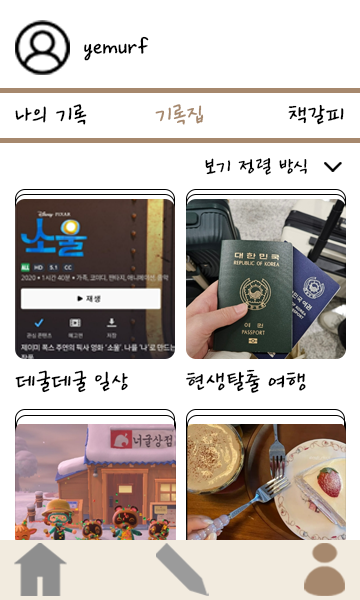
<style>
.page{position:relative;width:360px;height:600px;background:#ffffff}
.page>*{position:absolute;margin:0}
.t1{font:25px "Ownglyph_Dailyokja-Rg";color:#000000}
.t2{font:25px "Ownglyph_Dailyokja-Rg";color:#a6886d}
.t3{font:22px "Ownglyph_Dailyokja-Rg";color:#000000}
.t4{font:24.9px "Ownglyph_Dailyokja-Rg";color:#000000}
</style>
<div class="page">
<p class="t1" style="left:84px;top:36px;width:65px;height:25px">yemurf</p>
<p class="t1" style="left:15px;top:104px;width:72px;height:21px">나의 기록</p>
<p class="t2" style="left:155px;top:104px;width:49px;height:21px">기록집</p>
<p class="t1" style="left:288px;top:104px;width:56px;height:21px">책갈피</p>
<p class="t3" style="left:205px;top:158px;width:102px;height:17px">보기 정렬 방식</p>
<p class="t4" style="left:15px;top:370px;width:113px;height:23px">데굴데굴 일상</p>
<p class="t4" style="left:186px;top:369px;width:120px;height:24px">현생탈출 여행</p>
</div>
